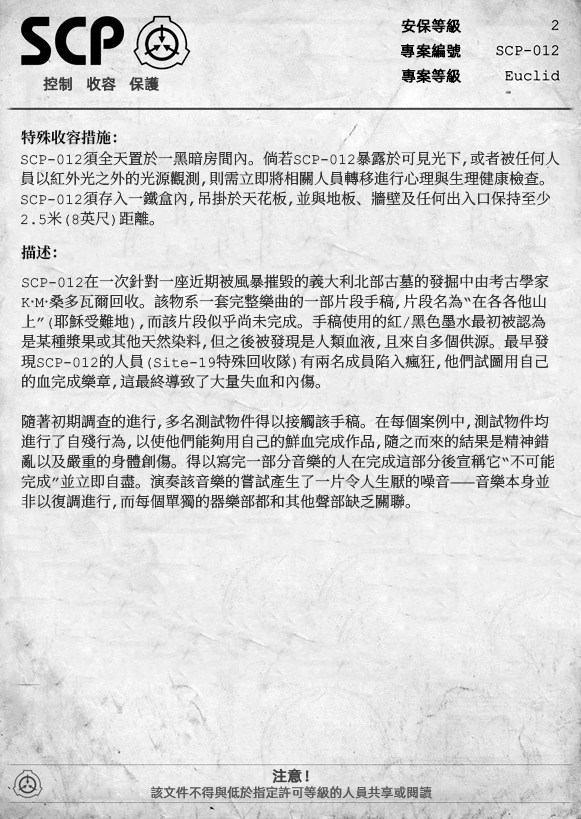
<style>
.page{position:relative;width:581px;height:819px}
.page>*{position:absolute;margin:0}
.t1{font:15px "AlibabaPuHuiTiR";color:#000000;font-weight:bold}
.t2{font:15px "AlibabaPuHuiTiR";color:#3d3d3d;font-weight:bold}
.t3{font:15px "ContainmentBreach-Bold";color:#121212}
.t4{font:15px/20px "ContainmentBreach-Regular";color:#353535}
.t5{font:15px "AlibabaPuHuiTiR";color:#414141;font-weight:bold}
.t6{font:13px "AlibabaPuHuiTiR";color:#575757}
</style>
<div class="page">
<p class="t1" style="left:401px;top:18px;width:60px;height:15px">安保等級</p>
<p class="t1" style="left:400px;top:43px;width:61px;height:15px">專案編號</p>
<p class="t2" style="left:43px;top:76px;width:116px;height:15px">控制   收容   保護</p>
<p class="t1" style="left:401px;top:68px;width:60px;height:15px">專案等級</p>
<p class="t3" style="left:21px;top:130px;width:96px;height:15px">特殊收容措施：</p>
<p class="t4" style="left:20px;top:151px;width:540px;height:75px">SCP-012須全天置於一黑暗房間內。倘若SCP-012暴露於可見光下，或者被任何人<br>員以紅外光之外的光源觀測，則需立即將相關人員轉移進行心理與生理健康檢查。<br>SCP-012須存入一鐵盒內，吊掛於天花板，並與地板、牆壁及任何出入口保持至少<br>2.5米（8英尺）距離。</p>
<p class="t3" style="left:21px;top:245px;width:36px;height:15px">描述：</p>
<p class="t4" style="left:21px;top:274px;width:534px;height:236px">SCP-012在一次針對一座近期被風暴摧毀的義大利北部古墓的發掘中由考古學家<br>K·M·桑多瓦爾回收。該物系一套完整樂曲的一部片段手稿，片段名為“在各各他山<br>上”（耶穌受難地），而該片段似乎尚未完成。手稿使用的紅/黑色墨水最初被認為<br>是某種漿果或其他天然染料，但之後被發現是人類血液，且來自多個供源。最早發<br>現SCP-012的人員（Site-19特殊回收隊）有兩名成員陷入瘋狂，他們試圖用自己<br>的血完成樂章，這最終導致了大量失血和內傷。<br><br>隨著初期調查的進行，多名測試物件得以接觸該手稿。在每個案例中，測試物件均<br>進行了自殘行為，以使他們能夠用自己的鮮血完成作品，隨之而來的結果是精神錯<br>亂以及嚴重的身體創傷。得以寫完一部分音樂的人在完成這部分後宣稱它“不可能<br>完成”並立即自盡。演奏該音樂的嘗試產生了一片令人生厭的噪音——音樂本身並<br>非以復調進行，而每個單獨的器樂部都和其他聲部缺乏關聯。</p>
<p class="t5" style="left:272px;top:768px;width:37px;height:15px">注意！</p>
<p class="t6" style="left:151px;top:786px;width:281px;height:13px">該文件不得與低於指定許可等級的人員共享或閱讀</p>
</div>
